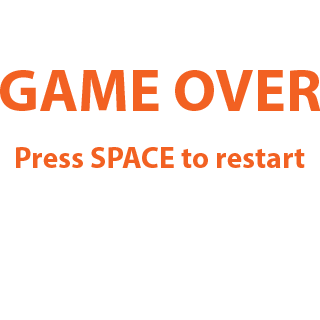
<style>
.page{position:relative;width:320px;height:320px;background:#ffffff}
.page>*{position:absolute;margin:0}
.t1{font:60px "MyriadPro-Bold";color:#f26122}
.t2{font:30px "MyriadPro-Bold";color:#f26122}
</style>
<div class="page">
<p class="t1" style="left:0px;top:70px;width:321px;height:41px">GAME OVER</p>
<p class="t2" style="left:16px;top:147px;width:289px;height:21px">Press SPACE to restart</p>
</div>
